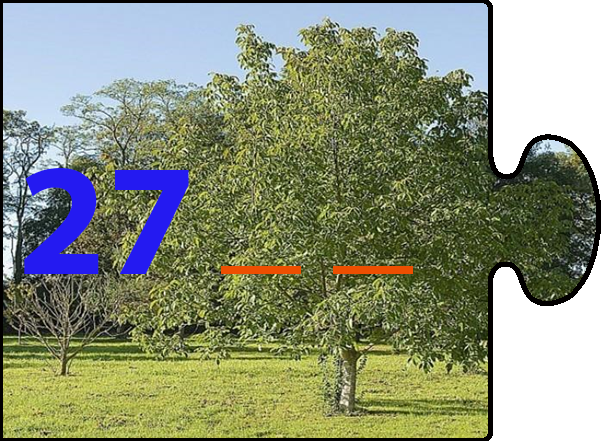
<style>
.page{position:relative;width:605px;height:441px}
.page>*{position:absolute;margin:0}
.t1{font:160px "MyriadPro-Bold";color:#241af1}
.t2{font:160px "MyriadPro-Bold";color:#ed4f01}
</style>
<div class="page">
<p class="t1" style="left:24px;top:168px;width:165px;height:106px">27</p>
<p class="t2" style="left:221px;top:266px;width:192px;height:8px">_ _</p>
</div>
